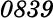
<style>
.page{position:relative;width:53px;height:18px;background:#ffffff}
.page>*{position:absolute;margin:0}
.t1{font:24px "CenturySchoolbook-Italic";color:#000000}
</style>
<div class="page">
<p class="t1" style="left:1px;top:0px;width:52px;height:18px">0839</p>
</div>
